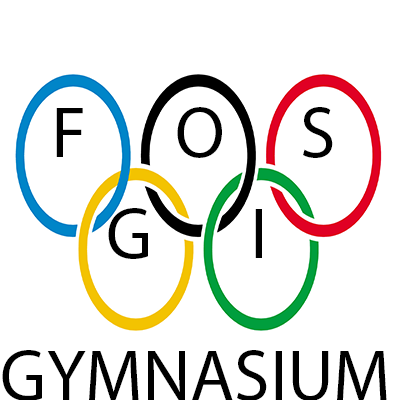
<style>
.page{position:relative;width:400px;height:400px;background:#ffffff}
.page>*{position:absolute;margin:0}
.t1{font:72px "MyriadPro-Regular";color:#000000}
</style>
<div class="page">
<p class="t1" style="left:56px;top:107px;width:277px;height:51px">F    O     S</p>
<p class="t1" style="left:108px;top:208px;width:154px;height:51px">G    I</p>
<p class="t1" style="left:2px;top:350px;width:385px;height:51px">GYMNASIUM</p>
</div>
